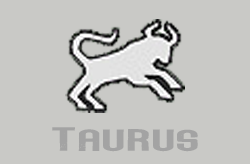
<style>
.page{position:relative;width:250px;height:164px;background:#c9c9c6}
.page>*{position:absolute;margin:0}
.t1{font:34.7px "Mountana-Regular";letter-spacing:-0.05em;color:#a3a3a3;scale:2.24 1}
</style>
<div class="page">
<p class="t1" style="left:52px;top:127px;width:146px;height:25px">Taurus</p>
</div>
